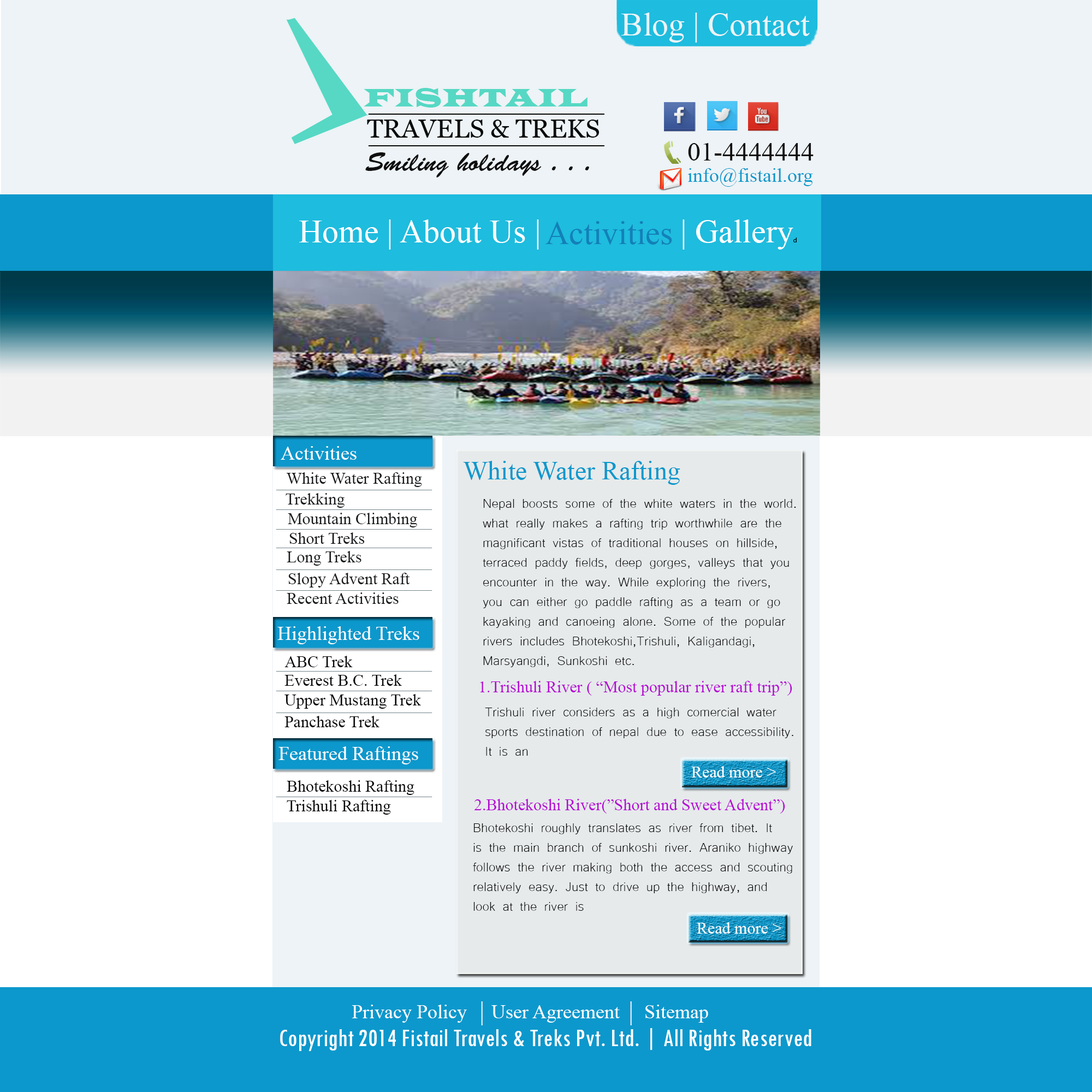
<style>
.page{position:relative;width:1092px;height:1092px;background:#ffffff}
.page>*{position:absolute;margin:0}
.t1{font:32.8px "TimesNewRomanPSMT";color:#edf3f6}
.t2{font:26.3px "LatinWide";color:#56d8c4;scale:0.88 1}
.t3{font:26.2px "Vani";color:#070a0a}
.t4{font:26.2px "TimesNewRomanPSMT";color:#0f0e0e}
.t5{font:26.2px "BrushScriptStd";color:#0f0e0e}
.t6{font:19.7px "TimesNewRomanPSMT";color:#0c98cc}
.t7{font:32.8px "TimesNewRomanPSMT";color:#ffffff}
.t8{font:6.6px "MyriadPro-Regular";color:#000000}
.t9{font:32.8px "TimesNewRomanPSMT";color:#1380b8}
.t10{font:19.7px "TimesNewRomanPSMT";color:#ffffff}
.t11{font:26.2px "TimesNewRomanPSMT";color:#0c98cc}
.t12{font:16.4px "TimesNewRomanPSMT";color:#181a1b}
.t13{font:16.4px "TimesNewRomanPSMT";color:#73848b}
.t14{font:16.4px "Microsoft-Yi-Baiti";color:#080808}
.t15{font:16.4px "TimesNewRomanPSMT";color:#080808}
.t16{font:16.4px "TimesNewRomanPSMT";color:#b509d4}
.t17{font:16.4px "TimesNewRomanPSMT";color:#ffffff}
.t18{font:26.2px "TwCenMT-Condensed";color:#ffffff}
</style>
<div class="page">
<p class="t1" style="left:621px;top:13px;width:189px;height:30px">Blog | Contact</p>
<p class="t2" style="left:364px;top:88px;width:223px;height:20px">FISHTAIL</p>
<p class="t3" style="left:368px;top:114px;width:236px;height:32px">______________<br>______________</p>
<p class="t3" style="left:367px;top:120px;width:232px;height:18px">TRAVELS &amp; TREKS</p>
<p class="t4" style="left:688px;top:143px;width:126px;height:18px">01-4444444</p>
<p class="t5" style="left:365px;top:152px;width:224px;height:25px">Smiling holidays . . .</p>
<p class="t6" style="left:688px;top:168px;width:125px;height:19px">info@fistail.org</p>
<p class="t7" style="left:299px;top:219px;width:498px;height:31px">Home | About Us |                 | Gallery<span class="t8">d</span></p>
<p class="t9" style="left:545px;top:221px;width:127px;height:24px">Activities</p>
<p class="t10" style="left:281px;top:446px;width:76px;height:14px">Activities</p>
<p class="t11" style="left:463px;top:461px;width:217px;height:24px">White Water Rafting</p>
<p class="t12" style="left:287px;top:472px;width:135px;height:15px">White Water Rafting</p>
<p class="t13" style="left:276px;top:490px;width:156px;height:0px">___________________</p>
<p class="t12" style="left:286px;top:493px;width:59px;height:15px">Trekking</p>
<p class="t13" style="left:276px;top:509px;width:156px;height:1px">___________________</p>
<p class="t14" style="left:483px;top:499px;width:313px;height:168px">Nepal boosts some of the white waters in the world.<br>what really makes a rafting trip worthwhile are the <br>magnificant vistas of traditional houses on hillside,<br>terraced paddy fields, deep gorges, valleys that you<br>encounter in the way. While exploring the rivers, <br>you can either go paddle rafting as a team or go <br>kayaking and canoeing alone. Some of the popular<br>rivers includes Bhotekoshi,Trishuli, Kaligandagi, <br>Marsyangdi, Sunkoshi etc.</p>
<p class="t12" style="left:288px;top:513px;width:129px;height:14px">Mountain Climbing</p>
<p class="t13" style="left:276px;top:529px;width:156px;height:1px">___________________</p>
<p class="t12" style="left:289px;top:532px;width:76px;height:12px">Short Treks</p>
<p class="t13" style="left:276px;top:548px;width:156px;height:0px">___________________</p>
<p class="t12" style="left:287px;top:551px;width:74px;height:15px">Long Treks</p>
<p class="t13" style="left:276px;top:569px;width:156px;height:1px">___________________</p>
<p class="t12" style="left:288px;top:573px;width:122px;height:14px">Slopy Advent Raft</p>
<p class="t13" style="left:276px;top:590px;width:156px;height:1px">___________________</p>
<p class="t12" style="left:287px;top:592px;width:112px;height:12px">Recent Activities</p>
<p class="t10" style="left:277px;top:626px;width:142px;height:18px">Highlighted Treks</p>
<p class="t15" style="left:284px;top:656px;width:69px;height:11px">ABC Trek</p>
<p class="t13" style="left:276px;top:671px;width:156px;height:1px">___________________</p>
<p class="t15" style="left:284px;top:674px;width:118px;height:12px">Everest B.C. Trek</p>
<p class="t16" style="left:480px;top:681px;width:312px;height:15px">1.Trishuli River ( “Most popular river raft trip”)</p>
<p class="t13" style="left:276px;top:691px;width:156px;height:0px">___________________</p>
<p class="t15" style="left:284px;top:694px;width:137px;height:15px">Upper Mustang Trek</p>
<p class="t13" style="left:276px;top:713px;width:156px;height:0px">___________________</p>
<p class="t14" style="left:485px;top:708px;width:308px;height:48px">Trishuli river considers as a high comercial water<br>sports destination of nepal due to ease accessibility.<br>It is an</p>
<p class="t15" style="left:284px;top:716px;width:95px;height:11px">Panchase Trek</p>
<p class="t10" style="left:278px;top:746px;width:140px;height:18px">Featured Raftings</p>
<p class="t17" style="left:691px;top:766px;width:85px;height:11px">Read more &gt;</p>
<p class="t15" style="left:287px;top:780px;width:127px;height:15px">Bhotekoshi Rafting</p>
<p class="t13" style="left:276px;top:797px;width:156px;height:0px">___________________</p>
<p class="t15" style="left:287px;top:800px;width:104px;height:15px">Trishuli Rafting</p>
<p class="t16" style="left:474px;top:799px;width:311px;height:15px">2.Bhotekoshi River(”Short and Sweet Advent”)</p>
<p class="t14" style="left:473px;top:823px;width:320px;height:88px">Bhotekoshi roughly translates as river from tibet. It <br>is the main branch of sunkoshi river. Araniko highway<br>follows the river making both the access and scouting<br>relatively easy. Just to drive up the highway, and <br>look at the river is</p>
<p class="t17" style="left:697px;top:922px;width:84px;height:12px">Read more &gt;</p>
<p class="t10" style="left:352px;top:1005px;width:356px;height:18px">Privacy Policy     User Agreement     Sitemap</p>
<p class="t18" style="left:280px;top:1028px;width:531px;height:23px">Copyright 2014 Fistail Travels &amp; Treks Pvt. Ltd. | All Rights Reserved</p>
</div>
